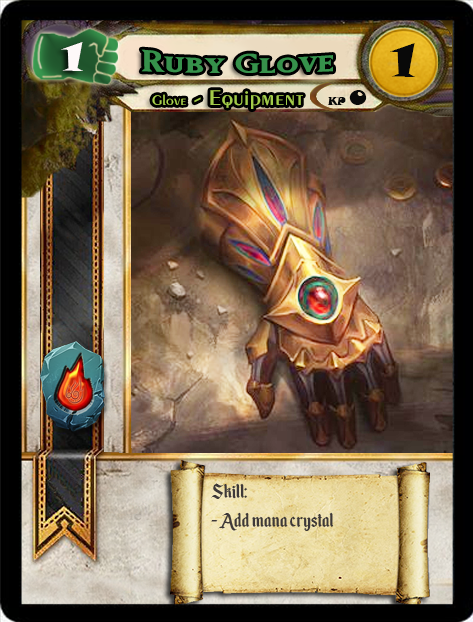
<style>
.page{position:relative;width:473px;height:622px}
.page>*{position:absolute;margin:0}
.t1{font:40px "SnapITC-Regular";color:#fef9f9;scale:1.05 1}
.t2{font:46.6px "SnapITC-Regular";color:#090909;scale:1.05 1}
.t3{font:14.7px "Exotic350BT-DemiBold";color:#abd44e;scale:1.06 1}
.t4{font:22.7px "Exotic350BT-DemiBold";color:#a3cb4a;scale:1.06 1}
.t5{font:10.7px "SnapITC-Regular";color:#090909}
.t6{font:20.5px "SnapITC-Regular";color:#090909}
.t7{font:24px "EnchantedLand";color:#3e3939}
</style>
<div class="page">
<p class="t1" style="left:61px;top:42px;width:22px;height:29px">1</p>
<p class="t2" style="left:390px;top:43px;width:25px;height:34px">1</p>
<p class="t3" style="left:152px;top:94px;width:34px;height:11px">Glove</p>
<p class="t4" style="left:194px;top:90px;width:109px;height:19px">- Equipment</p>
<p class="t5" style="left:327px;top:97px;width:19px;height:8px">KP</p>
<p class="t6" style="left:349px;top:90px;width:18px;height:15px">0</p>
<p class="t7" style="left:211px;top:483px;width:123px;height:48px">Skill:<br>- Add mana crystal</p>
</div>
